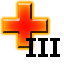
<style>
.page{position:relative;width:64px;height:64px;background:#ffffff}
.page>*{position:absolute;margin:0}
.t1{font:25px "Tahoma-Bold";color:#000000}
</style>
<div class="page">
<p class="t1" style="left:26px;top:38px;width:34px;height:19px">III</p>
</div>
